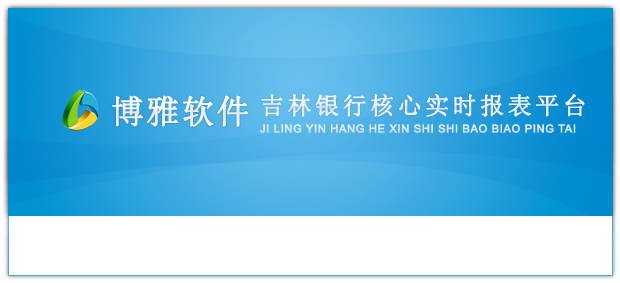
<style>
.page{position:relative;width:620px;height:283px;background:#ffffff}
.page>*{position:absolute;margin:0}
.t1{font:33px "SimSun";letter-spacing:0.04em;color:#f5f5f5;font-weight:bold}
.t2{font:24px "SimSun";letter-spacing:0.12em;color:#ffffff;font-weight:bold}
.t3{font:11px "ArialMT";letter-spacing:0.04em;color:#dce9ed;font-weight:bold}
</style>
<div class="page">
<p class="t1" style="left:112px;top:95px;width:137px;height:32px">博雅软件</p>
<p class="t2" style="left:261px;top:93px;width:324px;height:24px">吉林银行核心实时报表平台</p>
<p class="t3" style="left:260px;top:124px;width:316px;height:9px">JI LING YIN HANG HE XIN SHI SHI BAO BIAO PING TAI</p>
</div>
